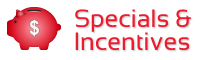
<style>
.page{position:relative;width:200px;height:60px;background:#ffffff}
.page>*{position:absolute;margin:0}
.t1{font:25px/23px "Sansation-Regular";color:#ee1b2e}
</style>
<div class="page">
<p class="t1" style="left:75px;top:9px;width:116px;height:41px">Specials &amp;<br>Incentives</p>
</div>
